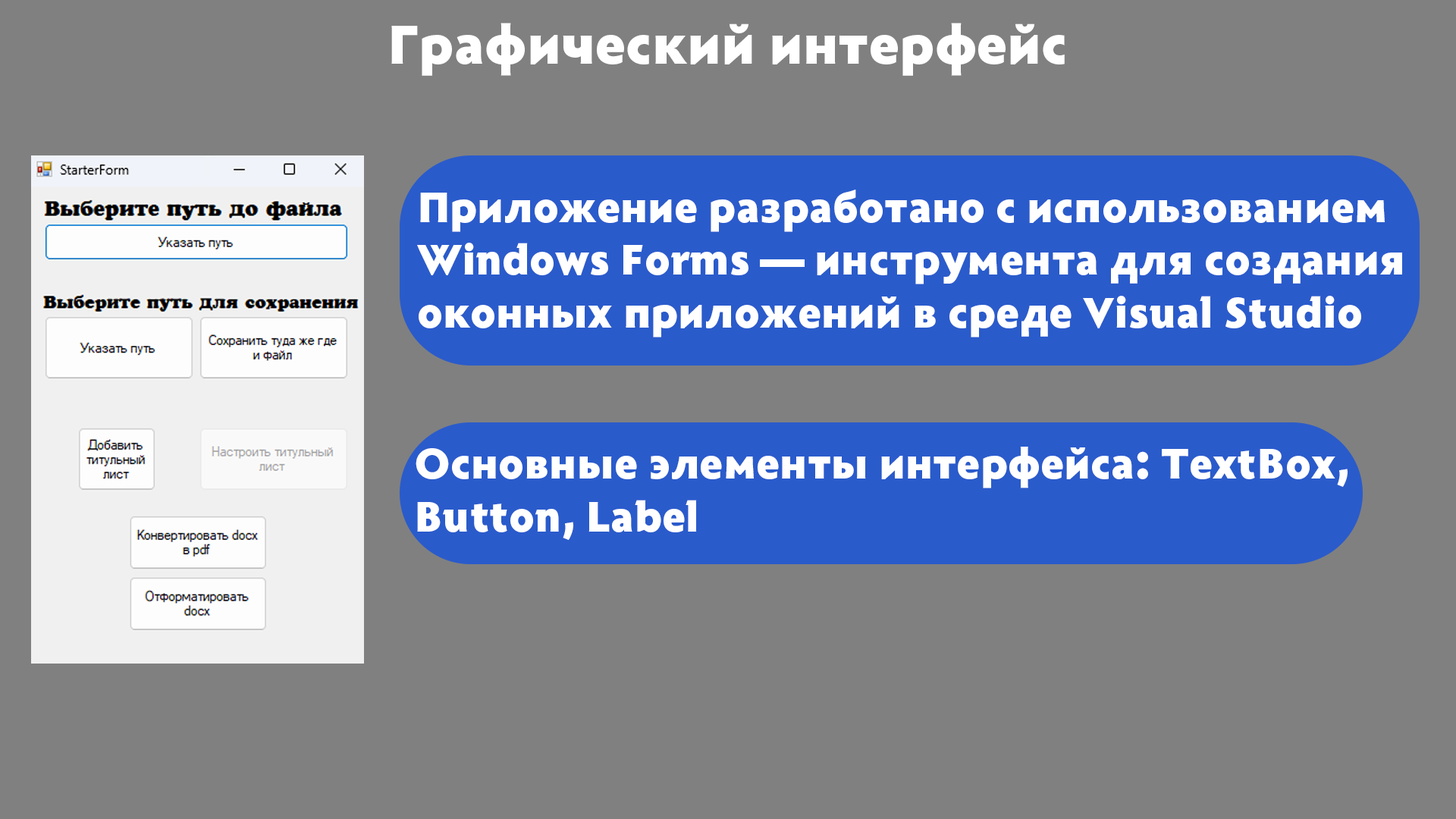
<style>
.page{position:relative;width:1456px;height:819px;background:#808080}
.page>*{position:absolute;margin:0}
.t1{font:56.9px "Radiance-Black";color:#ffffff}
.t2{font:44.2px "Radiance-Black";color:#ffffff}
</style>
<div class="page">
<p class="t1" style="left:391px;top:23px;width:674px;height:53px">Графический интерфейс</p>
<p class="t2" style="left:417px;top:190px;width:985px;height:147px">Приложение разработано с использованием <br>Windows Forms — инструмента для создания <br>оконных приложений в среде Visual Studio</p>
<p class="t2" style="left:416px;top:447px;width:932px;height:93px">Основные элементы интерфейса: TextBox, <br>Button, Label</p>
</div>
